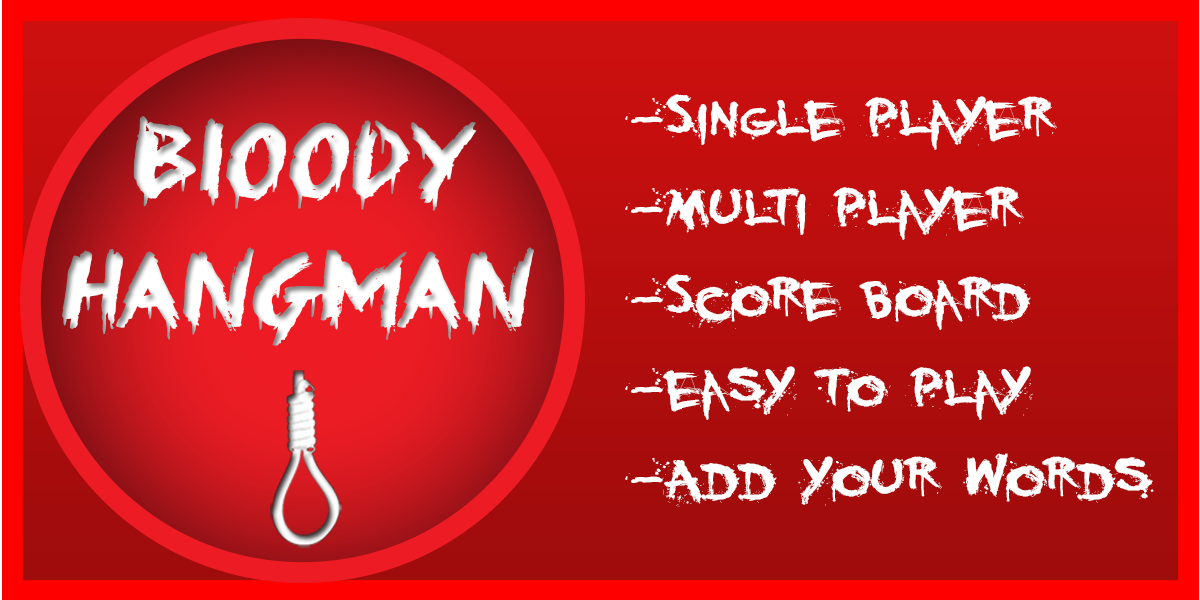
<style>
.page{position:relative;width:1200px;height:600px}
.page>*{position:absolute;margin:0}
.t1{font:75px "YouMurdererBB";color:#ffffff;scale:1.3 1}
</style>
<div class="page">
<p class="t1" style="left:625px;top:94px;width:529px;height:413px">-Single player<br>-multi player<br>-Score Board<br>-easy to play<br>-Add your words</p>
</div>
